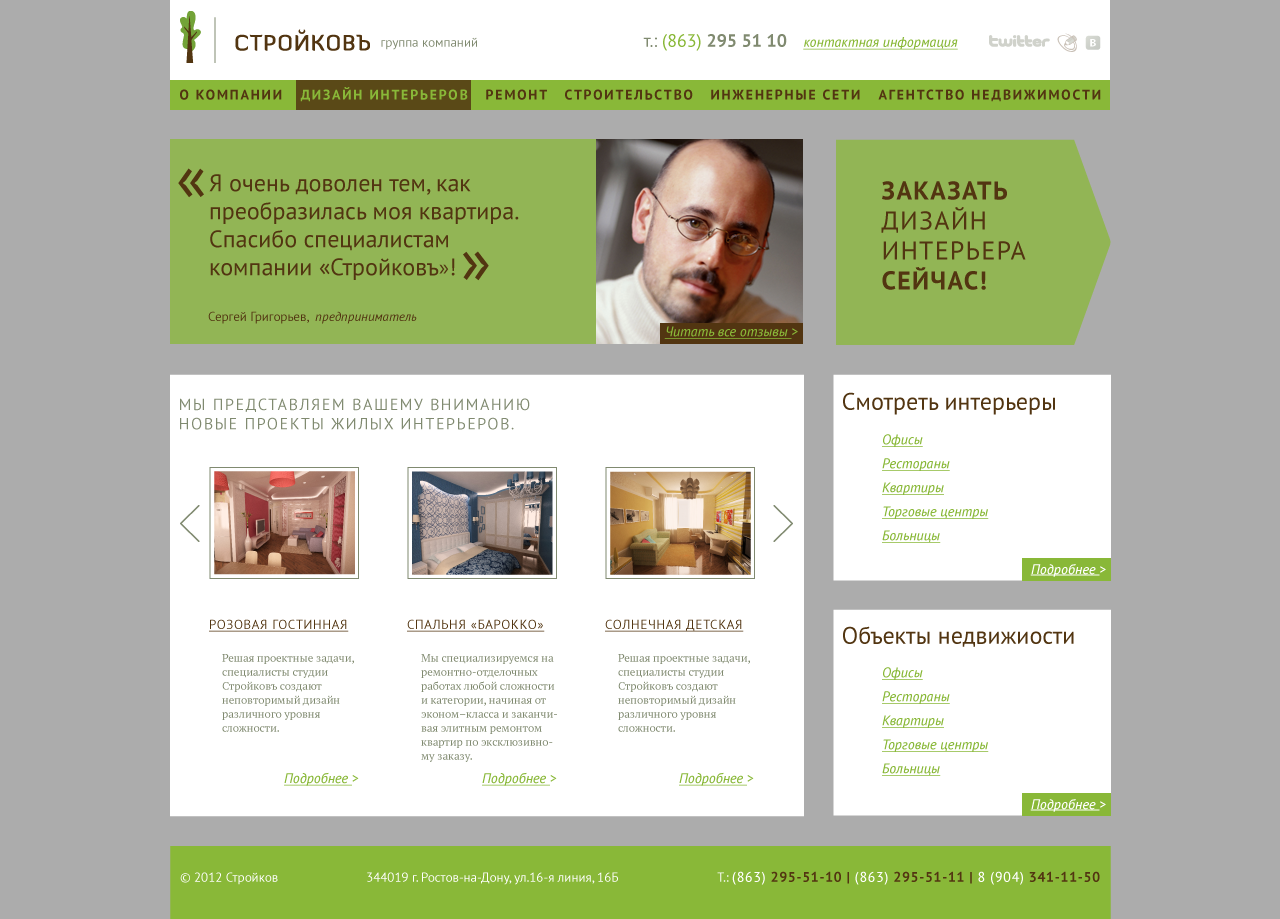
<style>
.page{position:relative;width:1280px;height:919px;background:#acacac}
.page>*{position:absolute;margin:0}
.t1{font:13px "PTSans-Regular";color:#808a70}
.t2{font:18px "PTSans-Bold";color:#808a70}
.t3{font:18px "PTSans-Regular";color:#808a70}
.t4{font:18px "PTSans-Regular";color:#89b838}
.t5{font:14px "PTSans-Italic";color:#89b838;text-decoration:underline}
.t6{font:14px "PTSans-Bold";letter-spacing:0.125em;color:#523511;text-transform:uppercase}
.t7{font:14px "PTSans-Bold";letter-spacing:0.125em;color:#89b838;text-transform:uppercase}
.t8{font:64px "PTSans-Regular";letter-spacing:0.05em;color:#523511;text-transform:uppercase}
.t9{font:24px/28px "PTSans-Regular";color:#523511}
.t10{font:24px/28px "MyriadPro-Regular";color:#523511}
.t11{font:25.9px/30px "PTSans-Regular";letter-spacing:0.05em;color:#523511;text-transform:uppercase}
.t12{font:25.9px/30px "PTSans-Bold";letter-spacing:0.05em;color:#523511;text-transform:uppercase}
.t13{font:13px "PTSans-Regular";color:#523511}
.t14{font:13px "PTSans-Italic";color:#523511}
.t15{font:14px "PTSans-Italic";color:#89b838}
.t16{font:16px "PTSans-Regular";letter-spacing:0.1em;color:#808a70;text-transform:uppercase}
.t17{font:24px "PTSans-Regular";color:#523511}
.t18{font:14px/18px "PTSans-Italic";color:#89b838;text-decoration:underline}
.t19{font:13px "PTSans-Regular";letter-spacing:0.05em;color:#523511;text-transform:uppercase;text-decoration:underline}
.t20{font:11px/14px "PTSerif-Regular";color:#808a70}
.t21{font:13px "PTSans-Regular";color:#ffffff}
.t22{font:14px "PTSans-Bold";letter-spacing:0.05em;color:#523511;text-transform:uppercase}
.t23{font:14px "PTSans-Regular";letter-spacing:0.05em;color:#ffffff;text-transform:uppercase}
</style>
<div class="page">
<p class="t1" style="left:381px;top:37px;width:96px;height:13px">группа компаний</p>
<p class="t2" style="left:643px;top:34px;width:144px;height:17px"><span class="t3">т.: </span><span class="t4">(863) </span>295 51 10</p>
<p class="t5" style="left:803px;top:37px;width:155px;height:13px">контактная информация</p>
<p class="t6" style="left:180px;top:89px;width:102px;height:11px">о компании</p>
<p class="t7" style="left:300px;top:87px;width:168px;height:15px">Дизайн интерьеров</p>
<p class="t6" style="left:486px;top:89px;width:61px;height:11px">РЕМОНТ</p>
<p class="t6" style="left:565px;top:89px;width:128px;height:11px">СТРОИТЕЛЬСТВО</p>
<p class="t6" style="left:711px;top:89px;width:149px;height:11px">Инженерные сети</p>
<p class="t6" style="left:878px;top:89px;width:223px;height:13px">агентство недвижимости</p>
<p class="t8" style="left:178px;top:168px;width:26px;height:30px">«</p>
<p class="t9" style="left:209px;top:174px;width:310px;height:106px">Я очень доволен тем, как преобразилась моя квартира.<br>Спасибо специалистам компании «Стройковъ<span class="t10">»</span>!</p>
<p class="t11" style="left:881px;top:181px;width:145px;height:109px"><span class="t12">Заказать<br></span>дизайн<br>интерьера<br><span class="t12">сейчас!</span></p>
<p class="t8" style="left:463px;top:251px;width:26px;height:30px">»</p>
<p class="t13" style="left:208px;top:311px;width:209px;height:13px">Сергей Григорьев,  <span class="t14">предприниматель</span></p>
<p class="t5" style="left:664px;top:326px;width:134px;height:13px">Читать все отзывы <span class="t15">&gt;</span></p>
<p class="t16" style="left:180px;top:398px;width:350px;height:32px">Мы представляем вашему вниманию<br>Новые проекты жилых интерьеров.</p>
<p class="t17" style="left:843px;top:392px;width:212px;height:23px">Cмотреть интерьеры</p>
<p class="t18" style="left:882px;top:434px;width:107px;height:109px">Офисы<br>Рестораны<br>Квартиры<br>Торговые центры<br>Больницы</p>
<p class="t19" style="left:209px;top:619px;width:140px;height:13px">Розовая гостинная</p>
<p class="t19" style="left:407px;top:619px;width:138px;height:13px">Спальня «Барокко»</p>
<p class="t19" style="left:605px;top:619px;width:139px;height:13px">Солнечная детская</p>
<p class="t17" style="left:843px;top:626px;width:231px;height:21px">Объекты недвижиости</p>
<p class="t20" style="left:222px;top:654px;width:132px;height:78px">Решая проектные задачи, специалисты студии Стройковъ создают неповторимый дизайн различного уровня сложности.</p>
<p class="t20" style="left:421px;top:654px;width:136px;height:108px">Мы специализируемся на ремонтно-отделочных работах любой сложности и категории, начиная от эконом–класса и заканчивая элитным ремонтом квартир по эксклюзивному заказу.</p>
<p class="t20" style="left:618px;top:654px;width:132px;height:78px">Решая проектные задачи, специалисты студии Стройковъ создают неповторимый дизайн различного уровня сложности.</p>
<p class="t18" style="left:882px;top:667px;width:107px;height:109px">Офисы<br>Рестораны<br>Квартиры<br>Торговые центры<br>Больницы</p>
<p class="t5" style="left:284px;top:772px;width:75px;height:14px">Подробнее <span class="t15">&gt;</span></p>
<p class="t5" style="left:482px;top:772px;width:75px;height:14px">Подробнее <span class="t15">&gt;</span></p>
<p class="t5" style="left:679px;top:772px;width:75px;height:14px">Подробнее <span class="t15">&gt;</span></p>
<p class="t21" style="left:180px;top:872px;width:98px;height:13px">© 2012 Стройков</p>
<p class="t21" style="left:367px;top:872px;width:251px;height:13px">344019 г. Ростов-на-Дону, ул.16-я линия, 16Б</p>
<p class="t22" style="left:717px;top:871px;width:383px;height:14px"><span class="t21">Т.: </span><span class="t23">(863) </span>295-51-10 | <span class="t23">(863) </span>295-51-11 | <span class="t23">8 (904) </span>341-11-50</p>
</div>
